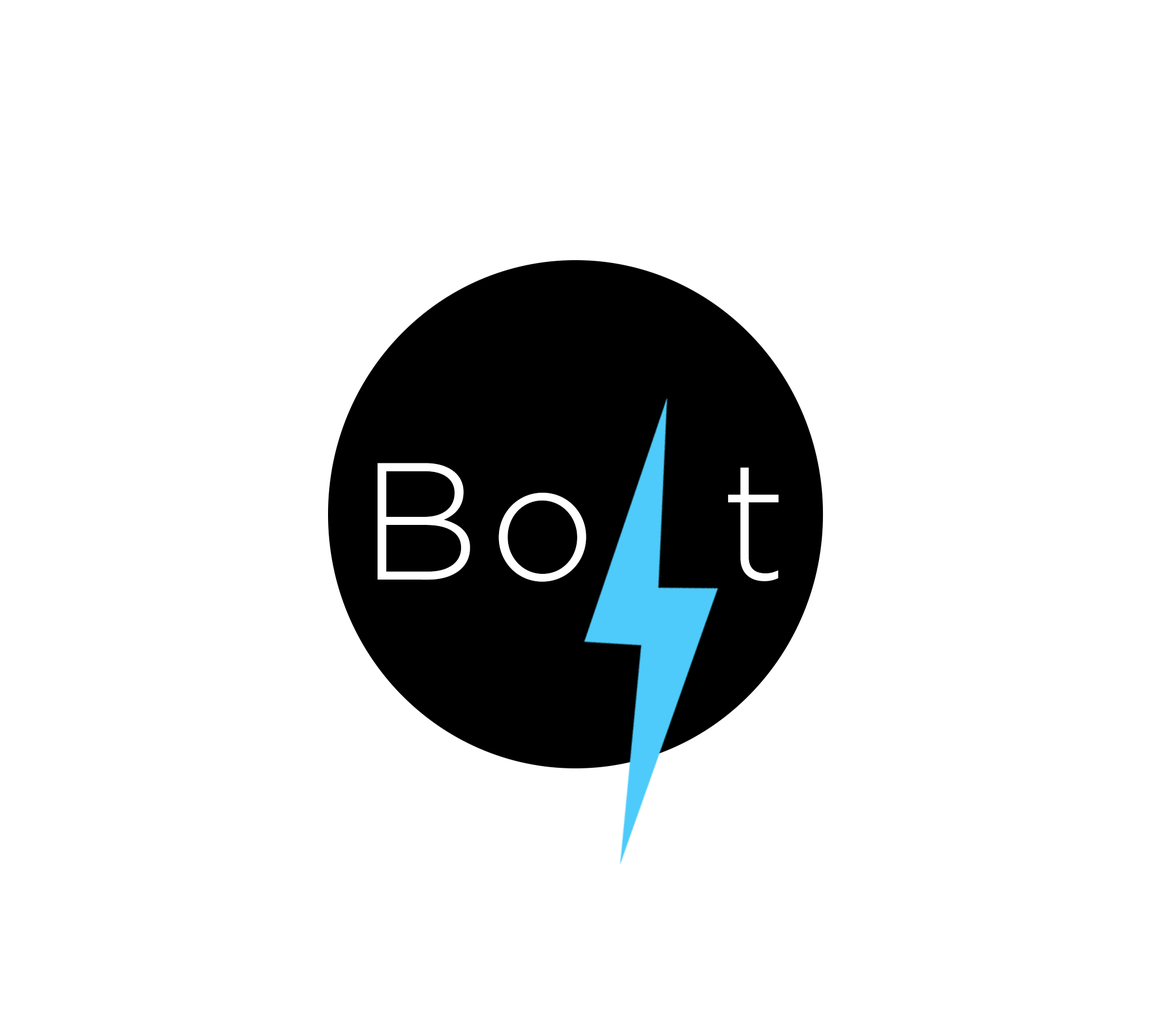
<style>
.page{position:relative;width:1151px;height:1036px;background:#ffffff}
.page>*{position:absolute;margin:0}
.t1{font:166.3px "Gotham-Light";letter-spacing:0.05em;color:#ffffff}
</style>
<div class="page">
<p class="t1" style="left:378px;top:463px;width:401px;height:119px">Bo  t</p>
</div>
